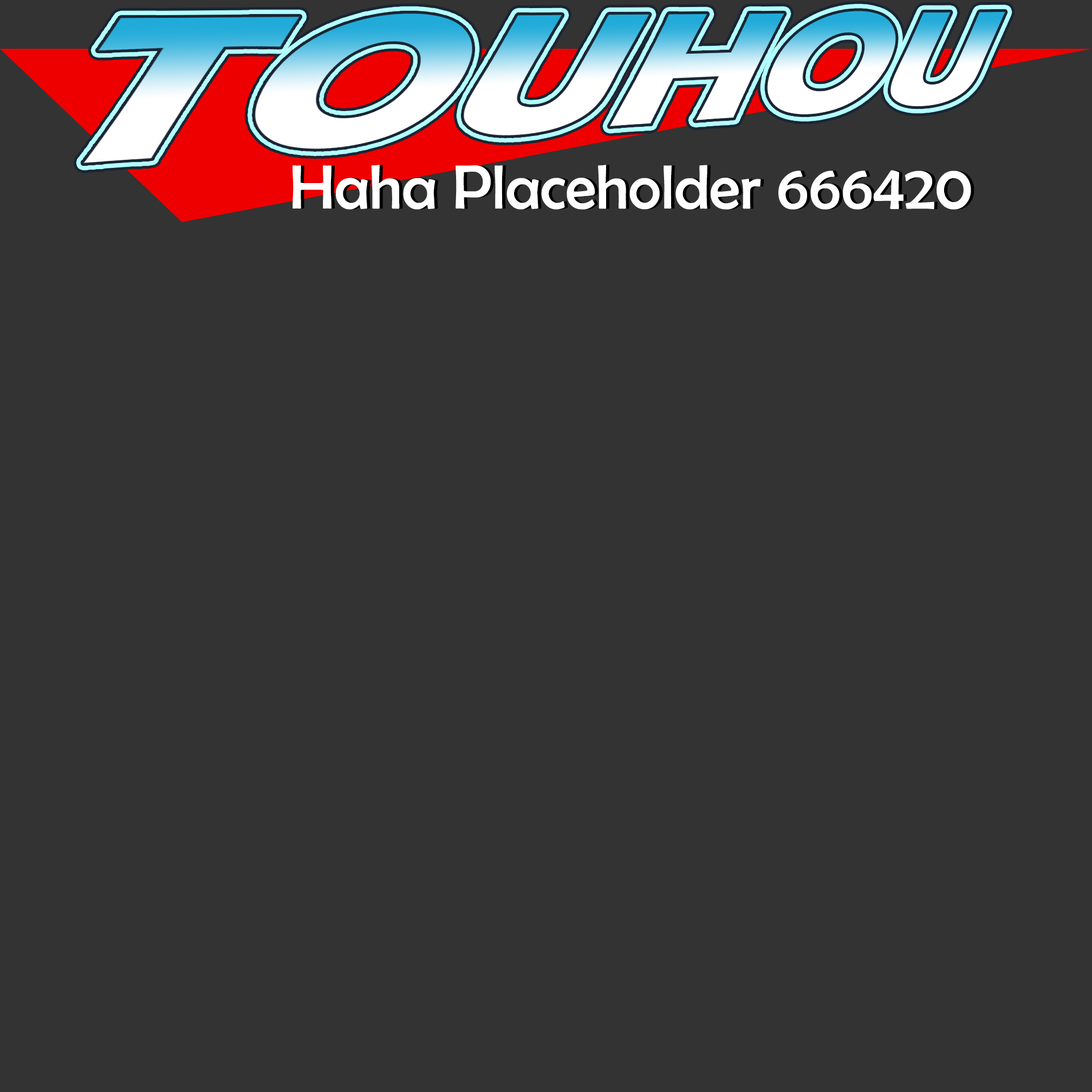
<style>
.page{position:relative;width:1092px;height:1092px;background:#333333}
.page>*{position:absolute;margin:0}
.t1{font:62.8px "BerlinSansFB-Reg";color:#ffffff}
</style>
<div class="page">
<p class="t1" style="left:292px;top:165px;width:679px;height:45px">Haha Placeholder 666420</p>
</div>
